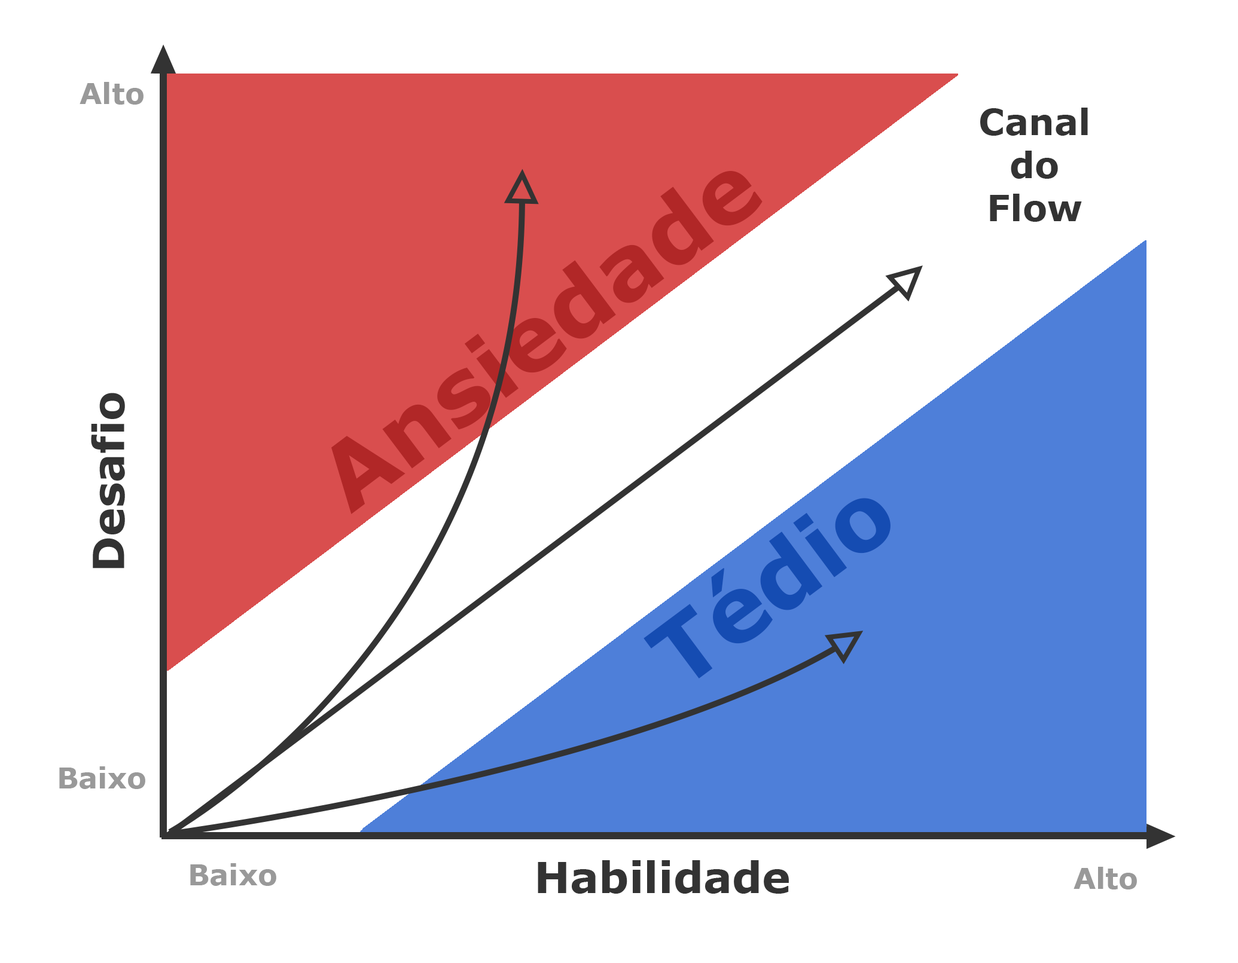
<style>
.page{position:relative;width:1238px;height:963px;background:#ffffff}
.page>*{position:absolute;margin:0}
.t1{font:28.7px "Verdana-Bold";color:#999999}
.t2{font:35.9px "Verdana-Bold";color:#333333}
.t3{font:89.7px "Verdana-Bold";color:#b12727}
.t4{font:89.7px "Verdana-Bold";color:#154cb2}
.t5{font:43.1px "Verdana-Bold";color:#333333}
</style>
<div class="page">
<p class="t1" style="left:80px;top:82px;width:64px;height:23px">Alto</p>
<p class="t2" style="left:980px;top:108px;width:108px;height:114px;text-align:center">Canal <br>do <br>Flow</p>
<p class="t3" style="left:331px;top:171px;width:431px;height:343px;rotate:-37deg">Ansiedade</p>
<p class="t4" style="left:643px;top:498px;width:247px;height:181px;rotate:-37deg">Tédio</p>
<p class="t1" style="left:59px;top:767px;width:86px;height:22px">Baixo</p>
<p class="t1" style="left:190px;top:863px;width:86px;height:23px">Baixo</p>
<p class="t5" style="left:538px;top:860px;width:251px;height:34px">Habilidade</p>
<p class="t1" style="left:1073px;top:867px;width:64px;height:23px">Alto</p>
</div>
